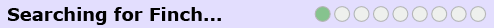
<style>
.page{position:relative;width:494px;height:28px;background:#e3defe}
.page>*{position:absolute;margin:0}
.t1{font:18px "Verdana-Bold";color:#000000}
</style>
<div class="page">
<p class="t1" style="left:8px;top:7px;width:213px;height:18px">Searching for Finch...</p>
</div>
